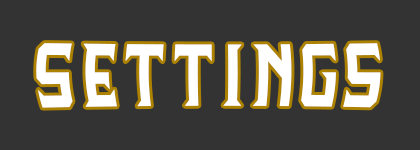
<style>
.page{position:relative;width:420px;height:150px;background:#333333}
.page>*{position:absolute;margin:0}
.t1{font:93.8px "Lorde-Havana";letter-spacing:0.1em;color:#ffffff;scale:0.75 1}
</style>
<div class="page">
<p class="t1" style="left:36px;top:43px;width:345px;height:65px">Settings</p>
</div>
